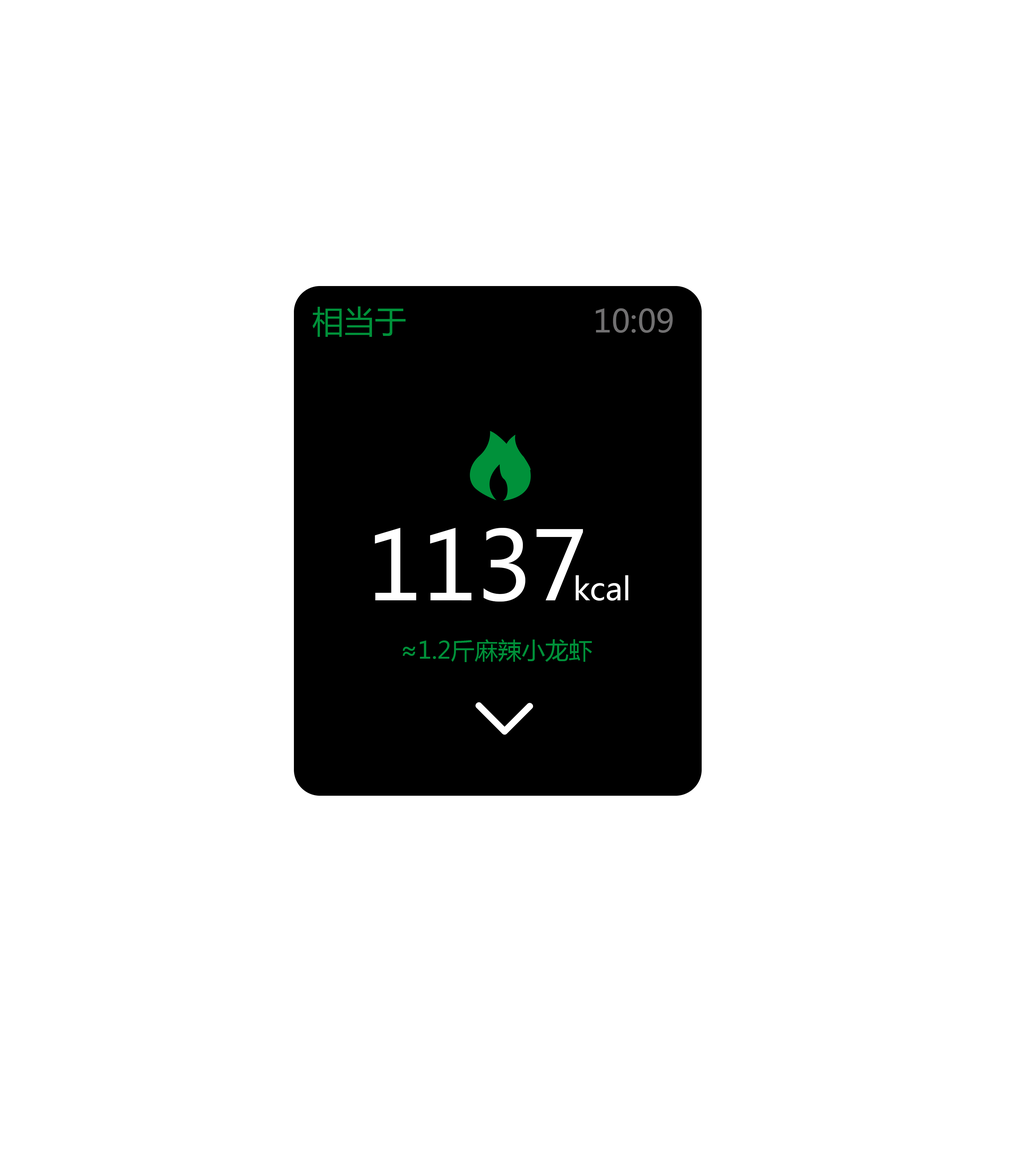
<style>
.page{position:relative;width:1026px;height:1163px;background:#ffffff}
.page>*{position:absolute;margin:0}
.t1{font:31.4px "MicrosoftYaHei";color:#00913a}
.t2{font:31.4px "MicrosoftYaHei";color:#717071}
.t3{font:94.1px "MicrosoftYaHei";color:#ffffff}
.t4{font:31.4px "MicrosoftYaHei";color:#ffffff}
.t5{font:23.5px "MicrosoftYaHei";color:#00913a}
</style>
<div class="page">
<p class="t1" style="left:312px;top:306px;width:93px;height:31px">相当于</p>
<p class="t2" style="left:595px;top:308px;width:78px;height:25px">10:09</p>
<p class="t3" style="left:375px;top:527px;width:208px;height:74px">1137</p>
<p class="t4" style="left:575px;top:575px;width:53px;height:25px">kcal</p>
<p class="t5" style="left:403px;top:639px;width:189px;height:23px">≈1.2斤麻辣小龙虾</p>
</div>
